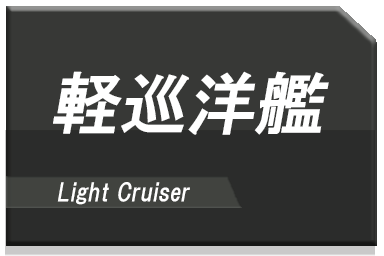
<style>
.page{position:relative;width:384px;height:256px;background:#373836}
.page>*{position:absolute;margin:0}
.t1{font:68px "HGPGothicE";color:#ffffff;font-style:italic}
.t2{font:24px "HGPGothicE";color:#ffffff;font-style:italic}
</style>
<div class="page">
<p class="t1" style="left:53px;top:71px;width:276px;height:64px">軽巡洋艦</p>
<p class="t2" style="left:57px;top:182px;width:133px;height:23px">Light Cruiser</p>
</div>
